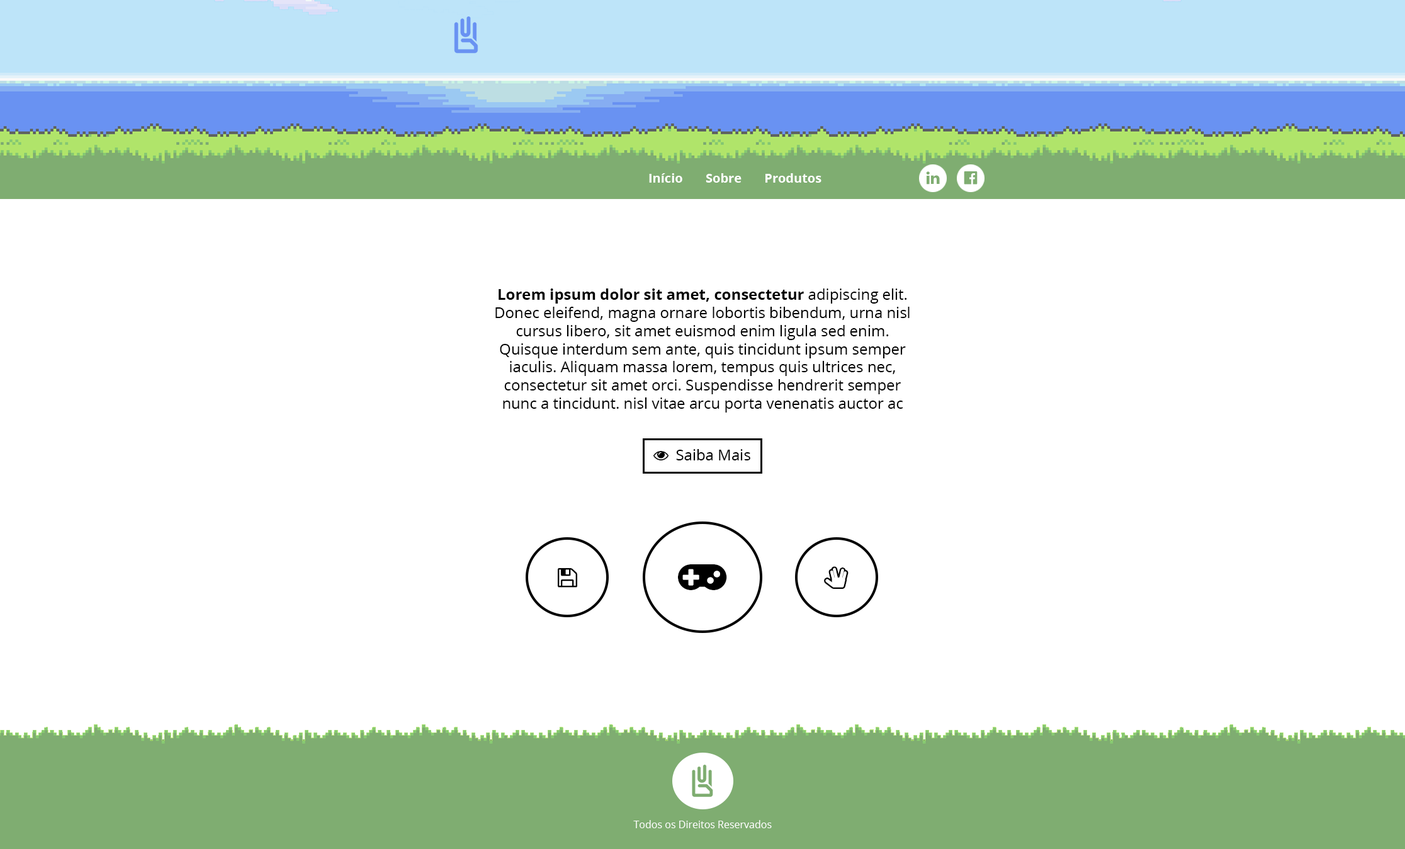
<style>
.page{position:relative;width:1405px;height:849px;background:#ffffff}
.page>*{position:absolute;margin:0}
.t1{font:12.6px "OpenSans-Bold";color:#ffffff}
.t2{font:15.1px "OpenSans";color:#000000}
.t3{font:15.1px "OpenSans-Bold";color:#000000}
.t4{font:10.1px "OpenSans";color:#ffffff}
</style>
<div class="page">
<p class="t1" style="left:649px;top:173px;width:173px;height:10px">Início       Sobre       Produtos</p>
<p class="t2" style="left:495px;top:288px;width:415px;height:124px;text-align:center"><span class="t3">Lorem ipsum dolor sit amet, consectetur </span>adipiscing elit. Donec eleifend, magna ornare lobortis bibendum, urna nisl cursus libero, sit amet euismod enim ligula sed enim. Quisque interdum sem ante, quis tincidunt ipsum semper iaculis. Aliquam massa lorem, tempus quis ultrices nec, consectetur sit amet orci. Suspendisse hendrerit semper nunc a tincidunt. nisl vitae arcu porta venenatis auctor ac velit.</p>
<p class="t2" style="left:676px;top:449px;width:74px;height:11px">Saiba Mais</p>
<p class="t4" style="left:633px;top:820px;width:139px;height:8px">Todos os Direitos Reservados</p>
</div>
